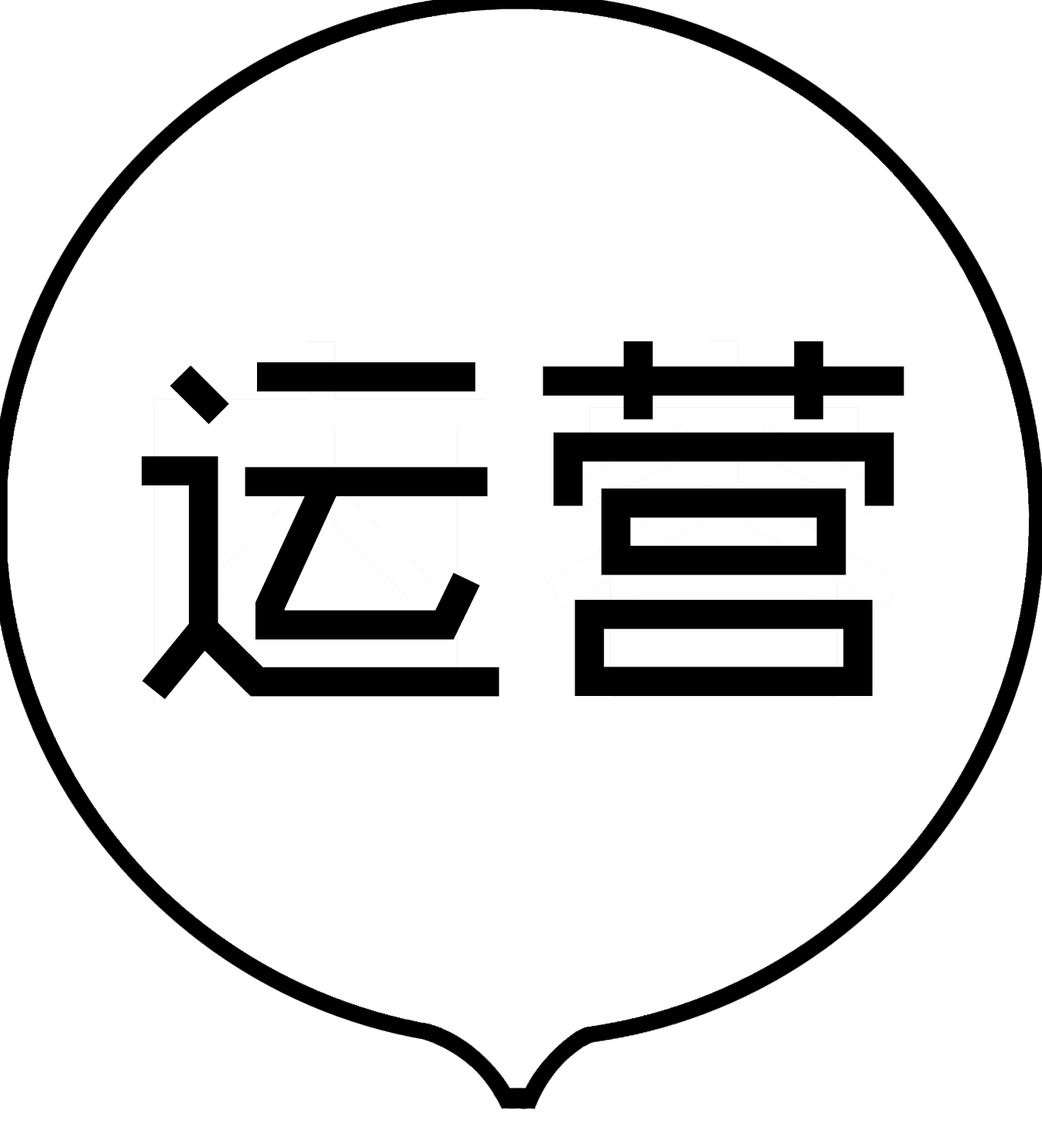
<style>
.page{position:relative;width:1042px;height:1145px;background:#ffffff}
.page>*{position:absolute;margin:0}
.t1{font:403.1px "RTWSShangGoG0v1-Regular";color:#000000}
</style>
<div class="page">
<p class="t1" style="left:142px;top:341px;width:762px;height:358px">运营</p>
</div>
